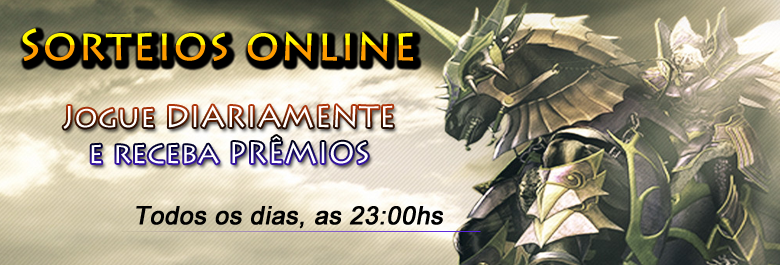
<style>
.page{position:relative;width:780px;height:265px}
.page>*{position:absolute;margin:0}
.t1{font:44px "LithosPro-Regular";font-weight:bold}
.t2{font:30px "LithosPro-Regular";color:#ffffff}
.t3{font:25px "ArialMT";color:#000000;font-weight:bold;font-style:italic}
</style>
<div class="page">
<p class="t1" style="left:22px;top:28px;width:392px;height:33px">Sorteios online</p>
<p class="t2" style="left:63px;top:105px;width:330px;height:59px;text-align:center">Jogue DIARIAMENTE<br>e receba PRÊMIOS</p>
<p class="t3" style="left:136px;top:206px;width:307px;height:23px">Todos os dias, as 23:00hs</p>
</div>
